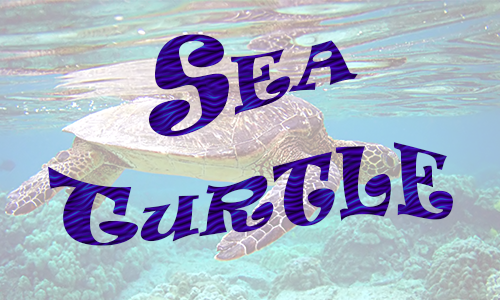
<style>
.page{position:relative;width:500px;height:300px}
.page>*{position:absolute;margin:0}
.t1{font:100px "Ravie";letter-spacing:0.01em;font-variant:small-caps}
</style>
<div class="page">
<p class="t1" style="left:48px;top:34px;width:405px;height:212px;text-align:center">Sea Turtle</p>
</div>
